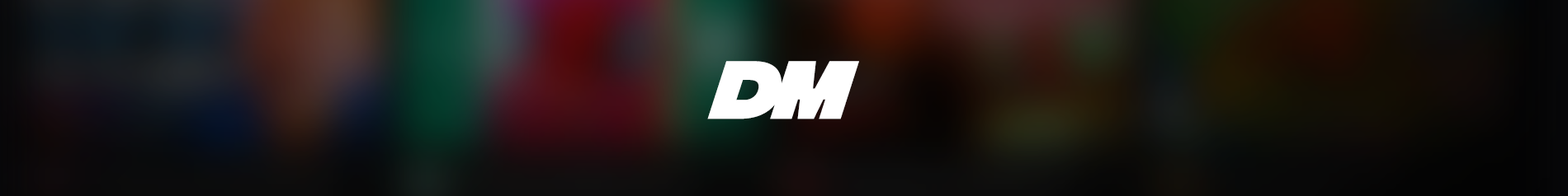
<style>
.page{position:relative;width:1568px;height:196px}
.page>*{position:absolute;margin:0}
.t1{font:82.5px "FONTSPRINGDEMO-IntegralCFHeavyItalic";letter-spacing:-0.06em;color:#ffffff}
.t2{font:82.5px "FONTSPRINGDEMO-IntegralCFHeavyItalic";color:#ffffff}
</style>
<div class="page">
<p class="t1" style="left:707px;top:61px;width:152px;height:59px">D<span class="t2">M</span></p>
</div>
